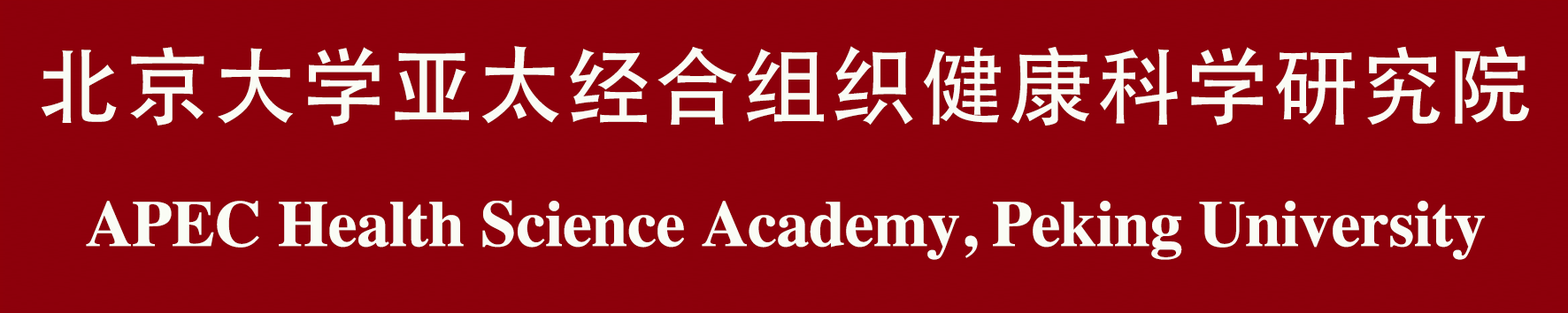
<style>
.page{position:relative;width:1568px;height:313px;background:#8d000b}
.page>*{position:absolute;margin:0}
.t1{font:65.3px "Times-Bold";letter-spacing:-0.005em;color:#fafcf5}
.t2{font:84.8px "STHeitiSC-Medium";letter-spacing:0.04em;color:#fafcf5}
</style>
<div class="page">
<p class="t1" style="left:42px;top:46px;width:1487px;height:214px;text-align:center"><span class="t2">北京大学亚太经合组织健康科学研究院<br></span>APEC Health Science Academy, Peking University</p>
</div>
